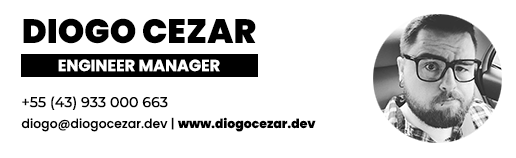
<style>
.page{position:relative;width:516px;height:158px;background:#ffffff}
.page>*{position:absolute;margin:0}
.t1{font:33.7px "Poppins-Black";color:#000000}
.t2{font:16px "Poppins-Bold";color:#ffffff;text-transform:uppercase}
.t3{font:14.2px "Montserrat-Medium";color:#000000}
.t4{font:12.5px "Poppins-Medium";color:#000000}
.t5{font:12.5px "Poppins-ExtraBold";color:#000000}
</style>
<div class="page">
<p class="t1" style="left:23px;top:18px;width:233px;height:26px">DIOGO CEZAR</p>
<p class="t2" style="left:58px;top:59px;width:162px;height:13px">ENGINEER MANAGER</p>
<p class="t3" style="left:22px;top:96px;width:146px;height:14px">+55 (43) 933 000 663</p>
<p class="t4" style="left:21px;top:117px;width:295px;height:15px">diogo@diogocezar.dev | <span class="t5">www.diogocezar.dev</span></p>
</div>
